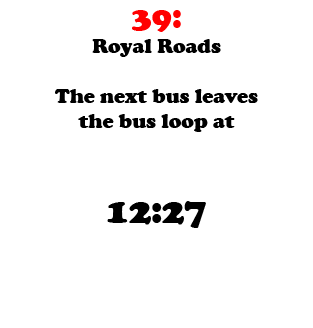
<style>
.page{position:relative;width:313px;height:328px;background:#ffffff}
.page>*{position:absolute;margin:0}
.t1{font:20.8px "CooperBlack";color:#000000}
.t2{font:33.3px "CooperBlack";color:#ff0000}
.t3{font:37.5px "CooperBlack";color:#000000}
</style>
<div class="page">
<p class="t1" style="left:55px;top:10px;width:203px;height:218px;text-align:center"><span class="t2">39: <br></span>Royal Roads<br><br>The next bus leaves <br>the bus loop at<br><br><br><span class="t3">12:27</span></p>
</div>
